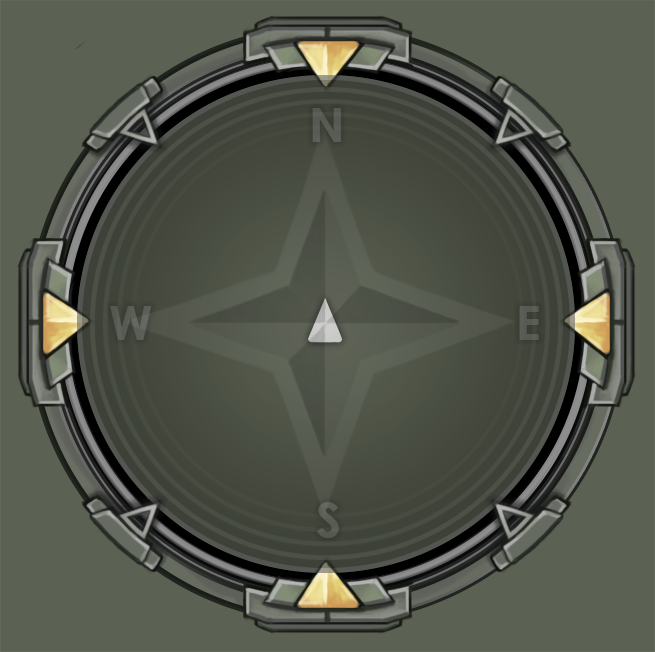
<style>
.page{position:relative;width:655px;height:652px;background:#5c6253}
.page>*{position:absolute;margin:0}
.t1{font:48px "LevenimMT-Bold";color:#595c54}
.t2{font:48px "LevenimMT-Bold";color:#5b5e56}
.t3{font:48px "LevenimMT-Bold";color:#585b54}
.t4{font:48px "LevenimMT-Bold";color:#5a5e56}
</style>
<div class="page">
<p class="t1" style="left:312px;top:108px;width:29px;height:34px">N</p>
<p class="t2" style="left:110px;top:306px;width:42px;height:34px">W</p>
<p class="t3" style="left:519px;top:306px;width:20px;height:34px">E</p>
<p class="t4" style="left:317px;top:502px;width:22px;height:36px">S</p>
</div>
